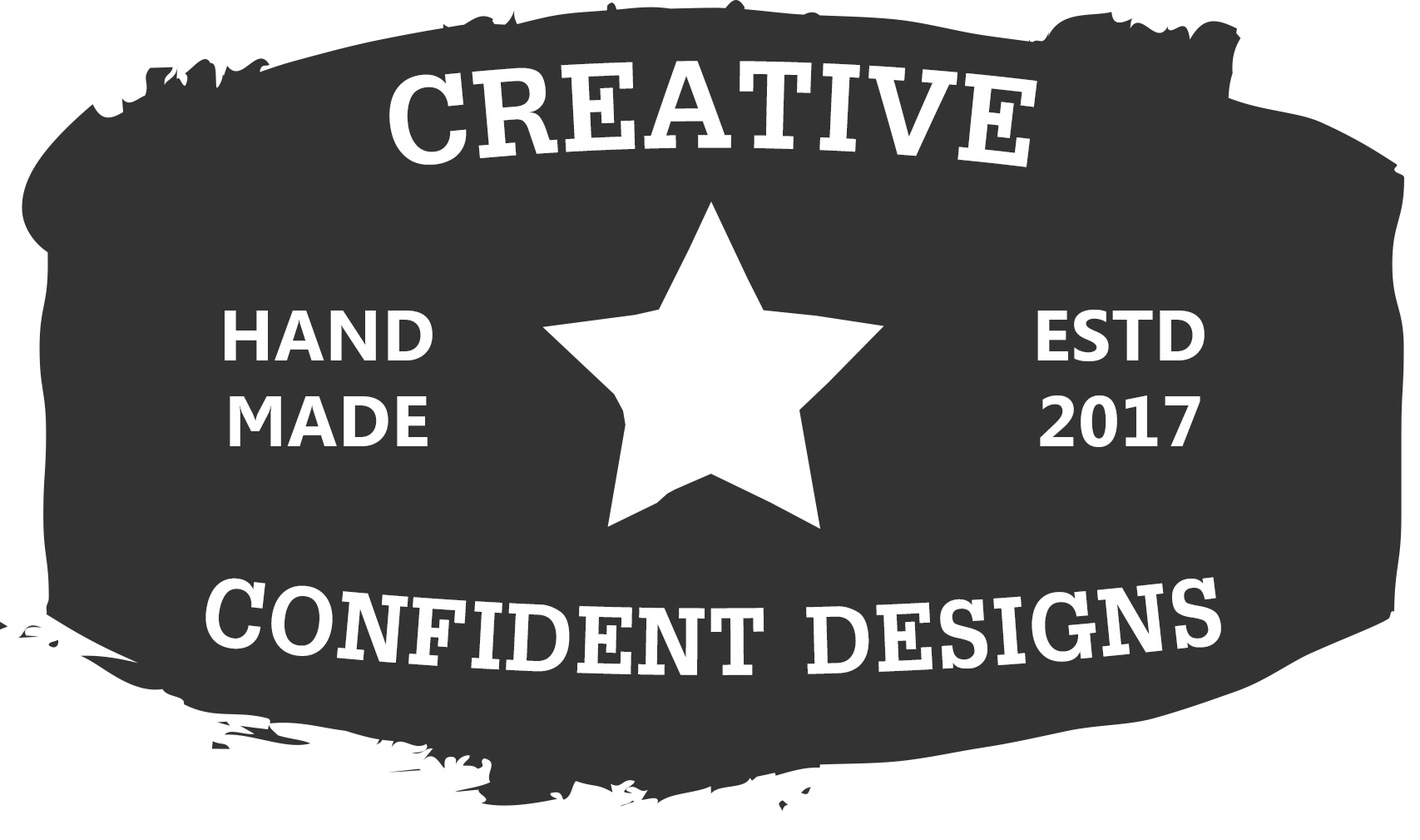
<style>
.page{position:relative;width:1420px;height:840px;background:#333333}
.page>*{position:absolute;margin:0}
.t1{font:198px "DilleniaUPCBold";letter-spacing:0.01em;color:#ffffff}
.t2{font:71.4px "Leelawadee-Bold";letter-spacing:0.01em;color:#ffffff}
.t3{font:153.1px "DilleniaUPCBold";letter-spacing:0.01em;color:#ffffff}
</style>
<div class="page">
<p class="t1" style="left:389px;top:61px;width:649px;height:106px">CREATIVE</p>
<p class="t2" style="left:225px;top:310px;width:208px;height:136px;text-align:center">HAND<br>MADE</p>
<p class="t2" style="left:1038px;top:310px;width:167px;height:137px;text-align:center">ESTD<br>2017</p>
<p class="t3" style="left:206px;top:577px;width:1015px;height:98px">CONFIDENT DESIGNS</p>
</div>
